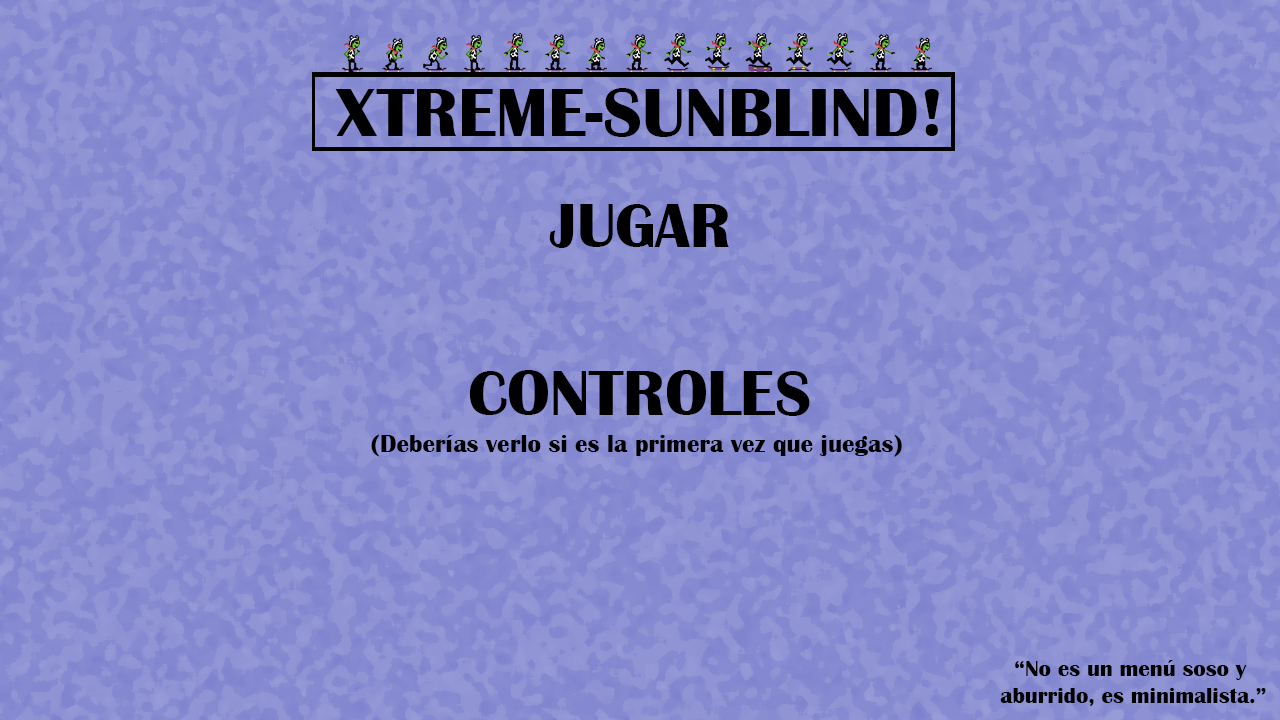
<style>
.page{position:relative;width:1280px;height:720px;background:#868ad1}
.page>*{position:absolute;margin:0}
.t1{font:70.8px "BritannicBold";color:#000000}
.t2{font:63.6px "BritannicBold";color:#000000}
.t3{font:65.6px "BritannicBold";color:#000000}
.t4{font:25.1px "BritannicBold";color:#000000}
.t5{font:22.8px "BritannicBold";color:#000000}
</style>
<div class="page">
<p class="t1" style="left:335px;top:88px;width:604px;height:49px">XTREME-SUNBLIND!</p>
<p class="t2" style="left:549px;top:204px;width:180px;height:44px">JUGAR</p>
<p class="t3" style="left:469px;top:370px;width:341px;height:46px">CONTROLES</p>
<p class="t4" style="left:371px;top:434px;width:531px;height:23px">(Deberías verlo si es la primera vez que juegas)</p>
<p class="t5" style="left:1000px;top:660px;width:266px;height:47px;text-align:center">“No es un menú soso y<br> aburrido, es minimalista.”</p>
</div>
